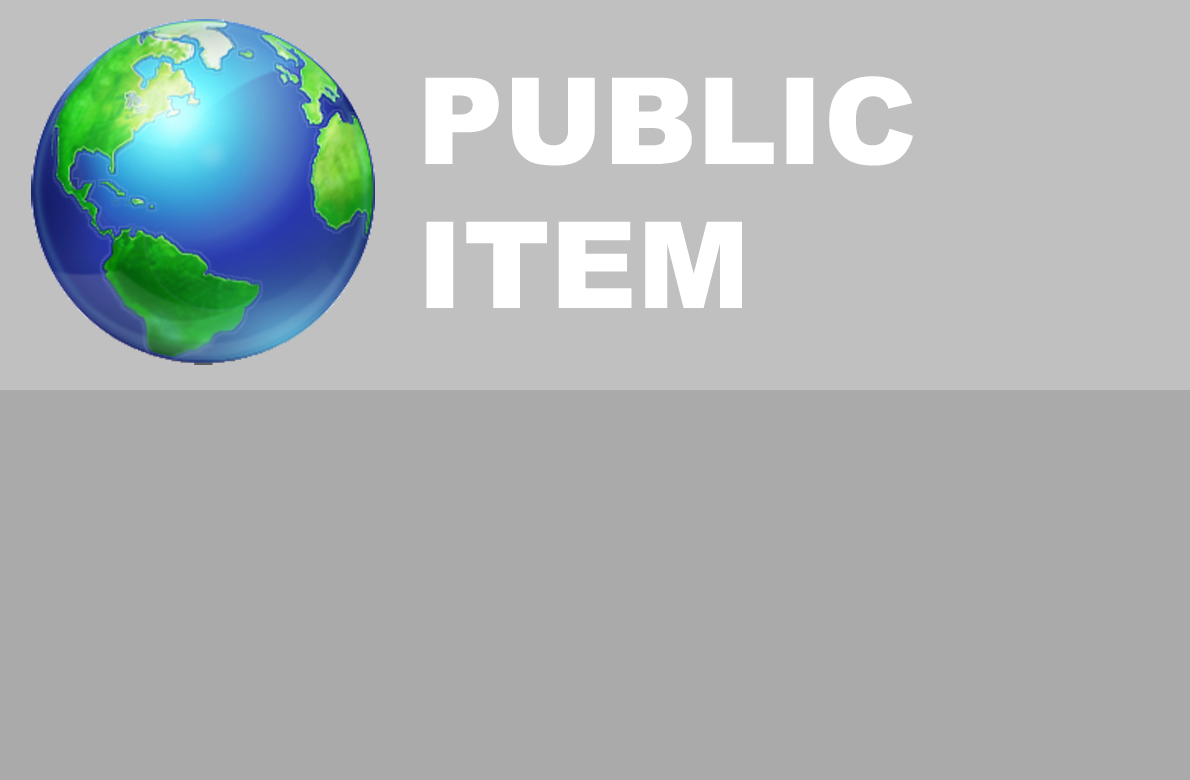
<style>
.page{position:relative;width:1190px;height:780px;background:#aaaaaa}
.page>*{position:absolute;margin:0}
.t1{font:120px "Arial-Black";color:#ffffff}
</style>
<div class="page">
<p class="t1" style="left:425px;top:76px;width:488px;height:232px">PUBLIC<br>ITEM</p>
</div>
